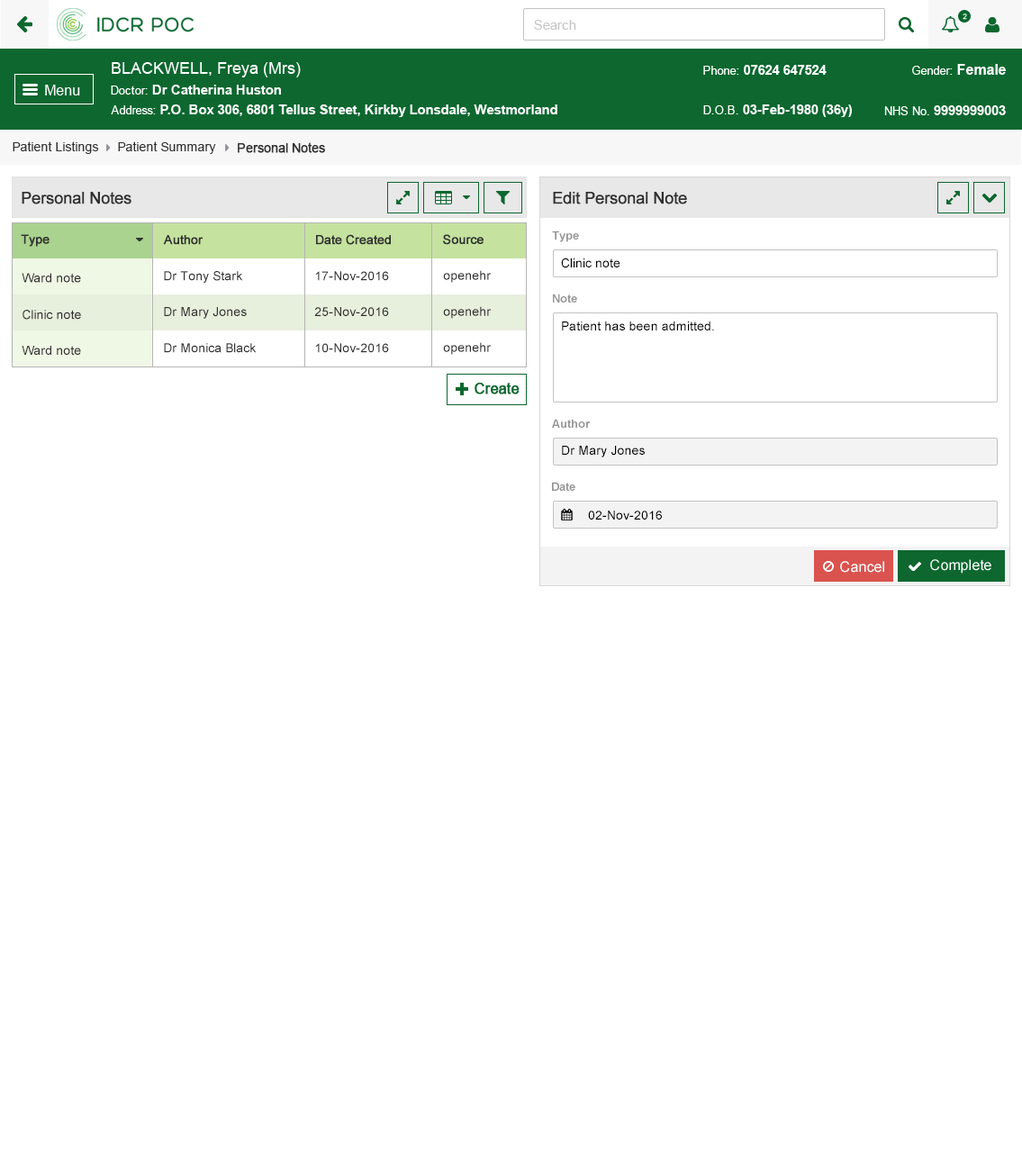
<style>
.page{position:relative;width:1022px;height:1167px;background:#ffffff}
.page>*{position:absolute;margin:0}
.t1{font:12.6px "ArialMT";color:#313131}
.t2{font:12.6px "ArialMT";color:#313131;font-weight:bold}
.t3{font:16.2px "ArialMT";color:#303030;font-weight:bold}
.t4{font:11.7px "Arial-BoldMT";color:#959595}
.t5{font:12.6px "ArialMT";color:#303030;font-weight:bold}
.t6{font:12.6px "ArialMT";color:#000000}
.t7{font:12.6px "ArialMT";color:#303030}
</style>
<div class="page">
<p class="t1" style="left:13px;top:141px;width:86px;height:13px">Patient Listings</p>
<p class="t1" style="left:118px;top:141px;width:98px;height:13px">Patient Summary</p>
<p class="t2" style="left:238px;top:142px;width:87px;height:11px">Personal Notes</p>
<p class="t3" style="left:22px;top:192px;width:109px;height:12px">Personal Notes</p>
<p class="t3" style="left:553px;top:192px;width:134px;height:12px">Edit Personal Note</p>
<p class="t4" style="left:552px;top:230px;width:27px;height:12px">Type</p>
<p class="t5" style="left:21px;top:234px;width:29px;height:13px">Type</p>
<p class="t5" style="left:163px;top:235px;width:40px;height:10px">Author</p>
<p class="t5" style="left:316px;top:234px;width:75px;height:11px">Date Created</p>
<p class="t5" style="left:443px;top:234px;width:40px;height:11px">Source</p>
<p class="t6" style="left:561px;top:258px;width:59px;height:10px">Clinic note</p>
<p class="t7" style="left:22px;top:273px;width:59px;height:10px">Ward note</p>
<p class="t7" style="left:164px;top:271px;width:79px;height:12px">Dr Tony Stark</p>
<p class="t7" style="left:315px;top:271px;width:74px;height:10px">17-Nov-2016</p>
<p class="t7" style="left:443px;top:270px;width:49px;height:13px">openehr</p>
<p class="t4" style="left:553px;top:294px;width:24px;height:9px">Note</p>
<p class="t7" style="left:23px;top:310px;width:58px;height:10px">Clinic note</p>
<p class="t7" style="left:164px;top:307px;width:83px;height:12px">Dr Mary Jones</p>
<p class="t7" style="left:314px;top:307px;width:75px;height:9px">25-Nov-2016</p>
<p class="t7" style="left:443px;top:306px;width:49px;height:13px">openehr</p>
<p class="t6" style="left:562px;top:321px;width:152px;height:9px">Patient has been admitted.</p>
<p class="t7" style="left:22px;top:346px;width:59px;height:9px">Ward note</p>
<p class="t7" style="left:164px;top:343px;width:93px;height:10px">Dr Monica Black</p>
<p class="t7" style="left:315px;top:343px;width:74px;height:10px">10-Nov-2016</p>
<p class="t7" style="left:443px;top:342px;width:49px;height:13px">openehr</p>
<p class="t4" style="left:552px;top:419px;width:39px;height:9px">Author</p>
<p class="t6" style="left:562px;top:446px;width:83px;height:11px">Dr Mary Jones</p>
<p class="t4" style="left:552px;top:482px;width:23px;height:9px">Date</p>
<p class="t6" style="left:588px;top:511px;width:74px;height:9px">02-Nov-2016</p>
</div>
